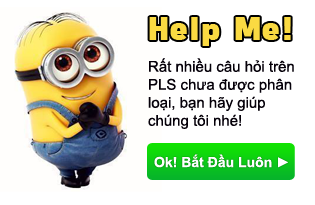
<style>
.page{position:relative;width:315px;height:205px;background:#ffffff}
.page>*{position:absolute;margin:0}
.t1{font:33px "FreeroadBlack";color:#fada42}
.t2{font:15px "ArialMT";color:#050009}
.t3{font:14px "Arial-BoldMT";color:#ffffff}
</style>
<div class="page">
<p class="t1" style="left:149px;top:17px;width:142px;height:29px">Help Me!</p>
<p class="t2" style="left:148px;top:58px;width:146px;height:71px">Rất nhiều câu hỏi trên PLS chưa được phân loại, bạn hãy giúp chúng tôi nhé!</p>
<p class="t3" style="left:154px;top:154px;width:134px;height:14px">Ok! Bắt Đầu Luôn ►</p>
</div>
